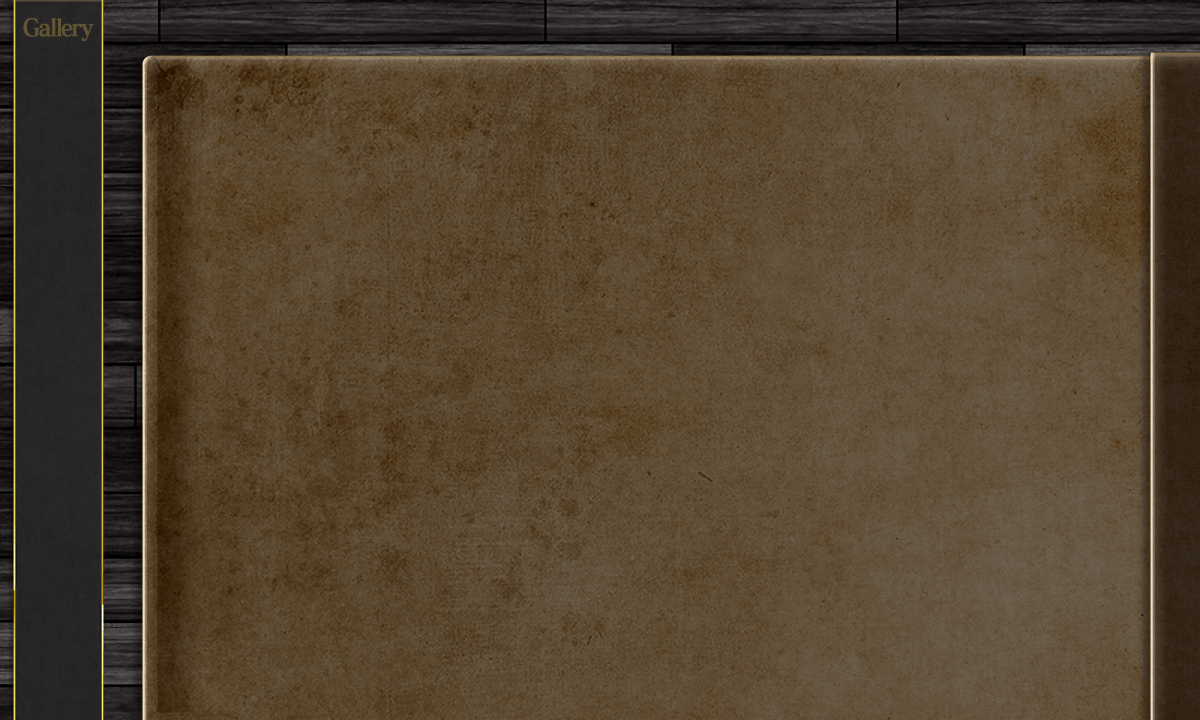
<style>
.page{position:relative;width:1200px;height:720px}
.page>*{position:absolute;margin:0}
.t1{font:24px "MatissePro-B";letter-spacing:-0.08em;color:#615535;scale:0.9 1}
</style>
<div class="page">
<p class="t1" style="left:23px;top:18px;width:71px;height:24px">Gallery</p>
</div>
